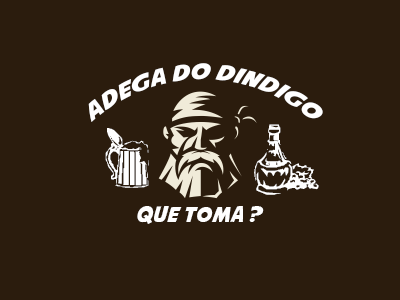
<style>
.page{position:relative;width:400px;height:300px;background:#2b1c0d}
.page>*{position:absolute;margin:0}
.t1{font:21.3px "AvengeanceMightiestAvenger";color:#ffffff}
.t2{font:96px "KRDrinkUp";color:#ffffff}
.t3{font:80px "KRDrinkUp";color:#ffffff}
</style>
<div class="page">
<p class="t1" style="left:88px;top:63px;width:235px;height:59px;rotate:2deg">ADEGA DO DINDIGO</p>
<p class="t2" style="left:254px;top:124px;width:65px;height:71px">A</p>
<p class="t3" style="left:105px;top:128px;width:44px;height:60px">7</p>
<p class="t1" style="left:137px;top:206px;width:127px;height:18px">que toma ?</p>
</div>
